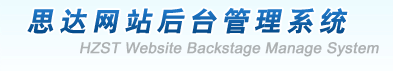
<style>
.page{position:relative;width:393px;height:71px}
.page>*{position:absolute;margin:0}
.t1{font:27px "HeitiCSEG";letter-spacing:0.2em;font-style:italic}
.t2{font:15px "ArialMT";color:#adb1b2;font-weight:bold;font-style:italic}
</style>
<div class="page">
<p class="t1" style="left:27px;top:8px;width:321px;height:26px">思达网站后台管理系统</p>
<p class="t2" style="left:80px;top:42px;width:299px;height:15px">HZST Website Backstage Manage System</p>
</div>
